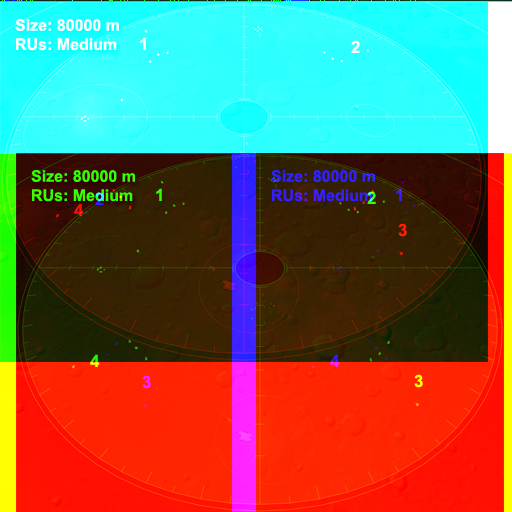
<style>
.page{position:relative;width:512px;height:512px}
.page>*{position:absolute;margin:0}
.t1{font:16px "Arial-BoldMT"}
.t2{font:17px "Arial-BoldMT"}
</style>
<div class="page">
<p class="t1" style="left:15px;top:17px;width:104px;height:32px">Size: 80000 m<br>RUs: Medium</p>
<p class="t2" style="left:140px;top:35px;width:6px;height:13px">1</p>
<p class="t2" style="left:74px;top:201px;width:10px;height:13px">4</p>
</div>
